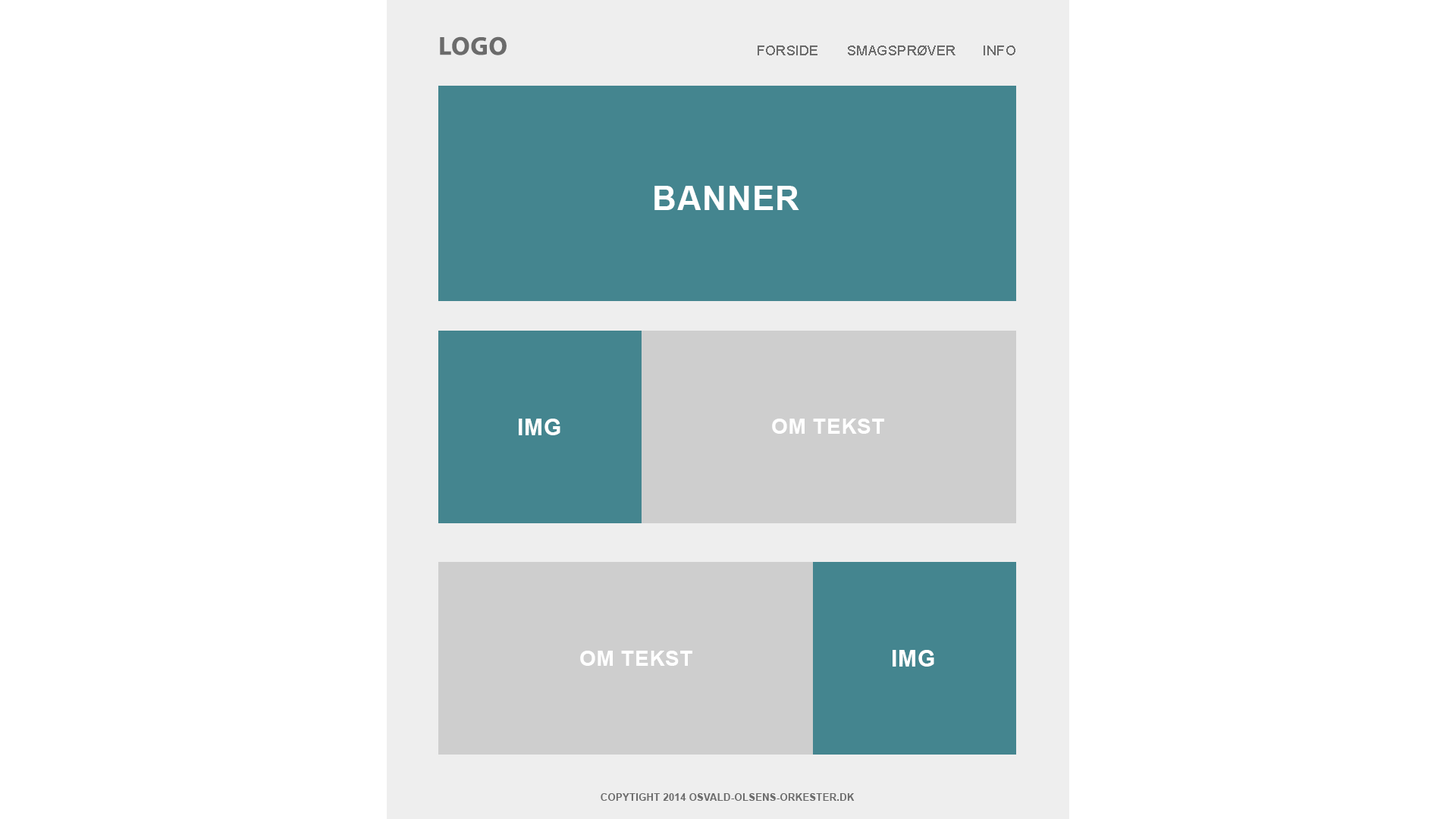
<style>
.page{position:relative;width:1456px;height:819px;background:#ffffff}
.page>*{position:absolute;margin:0}
.t1{font:25.9px "MyriadPro-Bold";letter-spacing:0.025em;color:#6b6b6b;text-transform:uppercase}
.t2{font:13.6px "ArialMT";letter-spacing:0.025em;color:#6b6b6b;text-transform:uppercase}
.t3{font:33.4px "Arial-BoldMT";letter-spacing:0.025em;color:#ffffff;text-transform:uppercase}
.t4{font:21.2px "Arial-BoldMT";letter-spacing:0.025em;color:#ffffff;text-transform:uppercase}
</style>
<div class="page">
<p class="t1" style="left:440px;top:36px;width:67px;height:19px">LOGO</p>
<p class="t2" style="left:758px;top:45px;width:257px;height:10px">Forside    Smagsprøver    INFO</p>
<p class="t3" style="left:654px;top:186px;width:145px;height:24px">Banner</p>
<p class="t4" style="left:772px;top:419px;width:112px;height:15px">Om tekst</p>
<p class="t4" style="left:580px;top:651px;width:112px;height:15px">om tekst</p>
</div>
